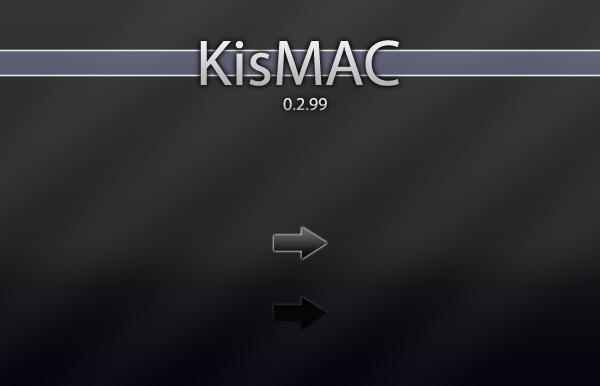
<style>
.page{position:relative;width:600px;height:386px}
.page>*{position:absolute;margin:0}
.t1{font:65px "MyriadPro-Regular"}
.t2{font:18px "MyriadPro-Regular"}
</style>
<div class="page">
<p class="t1" style="left:200px;top:40px;width:199px;height:46px">KisMAC</p>
<p class="t2" style="left:283px;top:98px;width:44px;height:13px">0.2.99</p>
</div>
